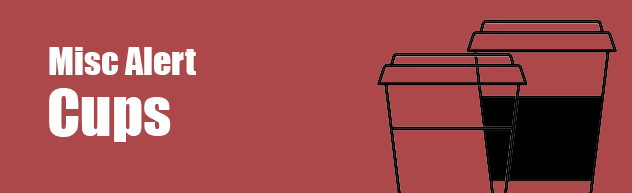
<style>
.page{position:relative;width:632px;height:193px;background:#ad484a}
.page>*{position:absolute;margin:0}
.t1{font:36px "Impact";color:#ffffff}
.t2{font:60px "Impact";color:#ffffff}
</style>
<div class="page">
<p class="t1" style="left:49px;top:47px;width:147px;height:28px">Misc Alert</p>
<p class="t2" style="left:49px;top:88px;width:122px;height:54px">Cups</p>
</div>
